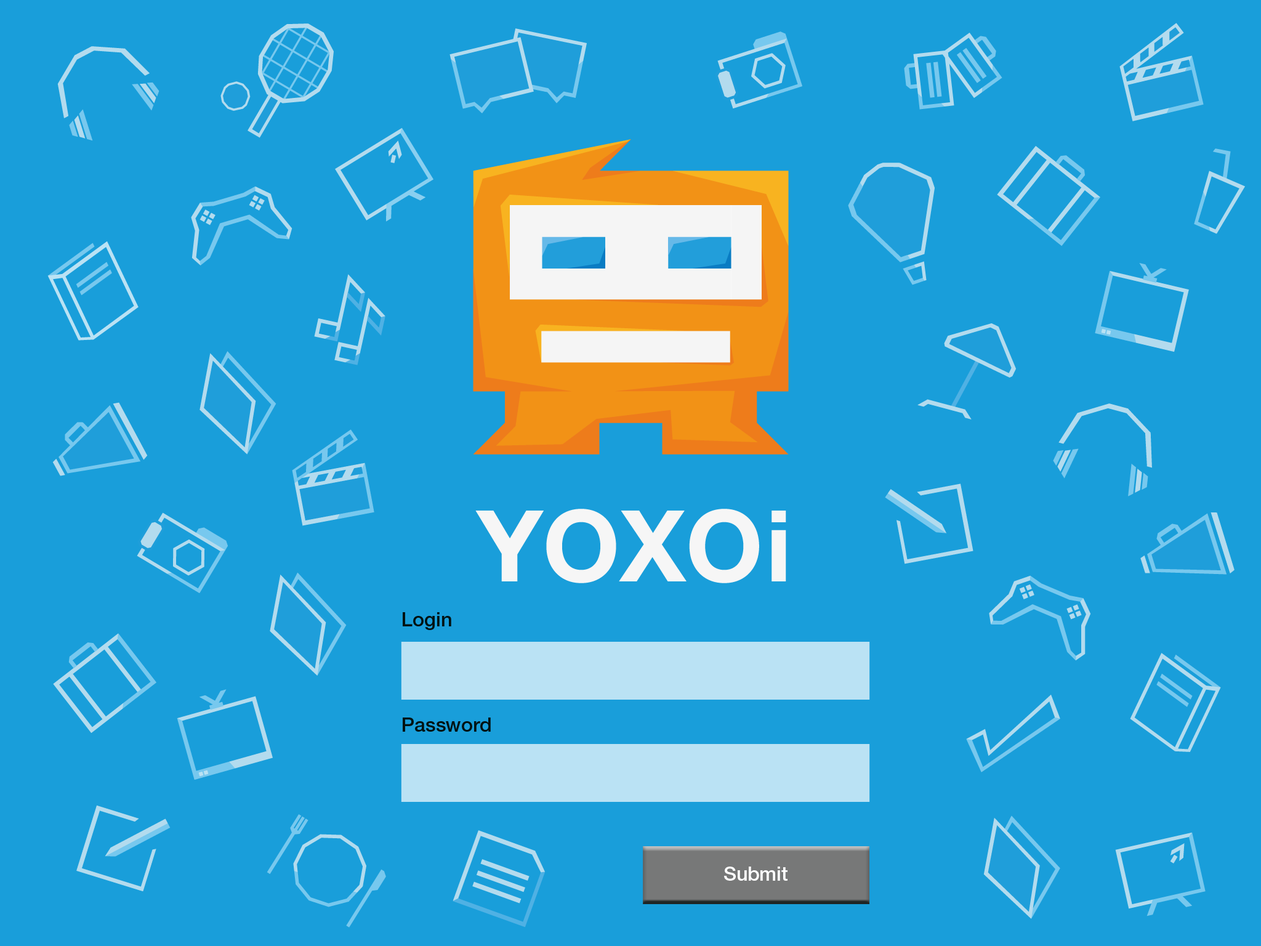
<style>
.page{position:relative;width:1261px;height:946px;background:#199eda}
.page>*{position:absolute;margin:0}
.t1{font:19.7px "HelveticaNeueLTStd-Md";color:#031313}
.t2{font:19.7px "HelveticaNeueLTStd-Md";color:#ffffff}
</style>
<div class="page">
<p class="t1" style="left:403px;top:612px;width:48px;height:18px">Login</p>
<p class="t1" style="left:403px;top:717px;width:88px;height:14px">Password</p>
<p class="t2" style="left:724px;top:866px;width:63px;height:14px">Submit</p>
</div>
